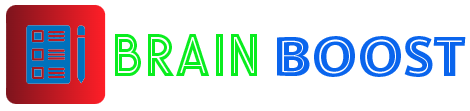
<style>
.page{position:relative;width:470px;height:111px;background:#ffffff}
.page>*{position:absolute;margin:0}
.t1{font:60px "Glaschu-Inline";color:#0aed1f;text-transform:uppercase}
.t2{font:60px "ProvanInline-Regular";color:#0a65ed;text-transform:uppercase}
</style>
<div class="page">
<p class="t1" style="left:115px;top:34px;width:351px;height:43px">brain <span class="t2">boost</span></p>
</div>
